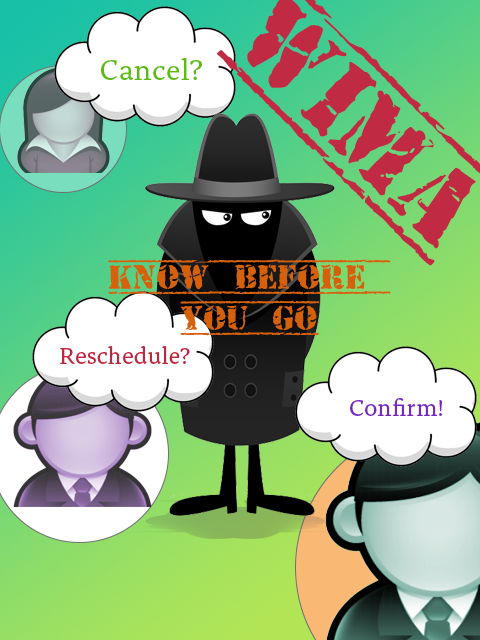
<style>
.page{position:relative;width:480px;height:640px}
.page>*{position:absolute;margin:0}
.t1{font:30px "AldaOT-Regular";color:#5ebb12}
.t2{font:34.4px "OldStamper";color:#d5610d}
.t3{font:24px "AldaOT-Regular";color:#c12640}
.t4{font:24px "AldaOT-Regular";color:#7626c1}
</style>
<div class="page">
<p class="t1" style="left:101px;top:58px;width:101px;height:22px">Cancel?</p>
<p class="t2" style="left:108px;top:259px;width:283px;height:77px;text-align:center">Know before <br>you go</p>
<p class="t3" style="left:60px;top:346px;width:130px;height:18px">Reschedule?</p>
<p class="t4" style="left:350px;top:398px;width:92px;height:18px">Confirm!</p>
</div>
